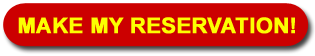
<style>
.page{position:relative;width:315px;height:56px;background:#cc0000}
.page>*{position:absolute;margin:0}
.t1{font:21.5px "Arial-BoldMT";color:#fcff00;text-transform:uppercase;font-weight:bold}
</style>
<div class="page">
<p class="t1" style="left:18px;top:17px;width:277px;height:17px">make my reservation!</p>
</div>
